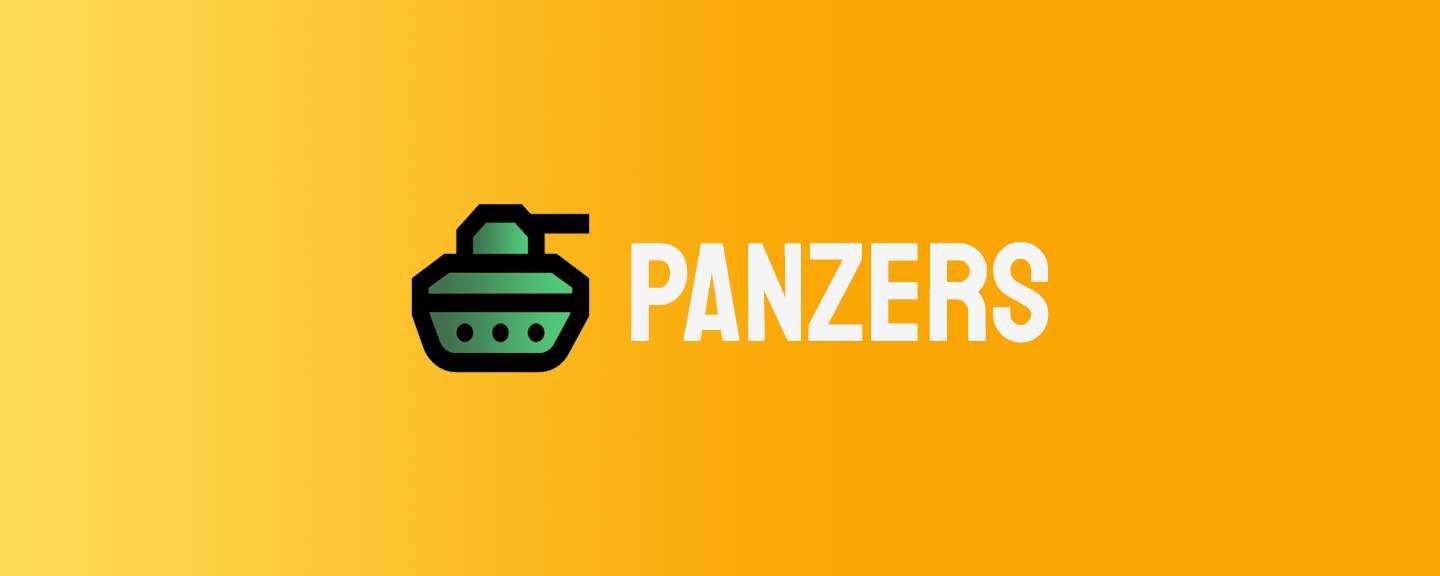
<style>
.page{position:relative;width:1440px;height:576px;background:#f9a602}
.page>*{position:absolute;margin:0}
.t1{font:140px "Staatliches-Regular";color:#f5f5f5}
</style>
<div class="page">
<p class="t1" style="left:631px;top:242px;width:418px;height:101px">PANZERS</p>
</div>
